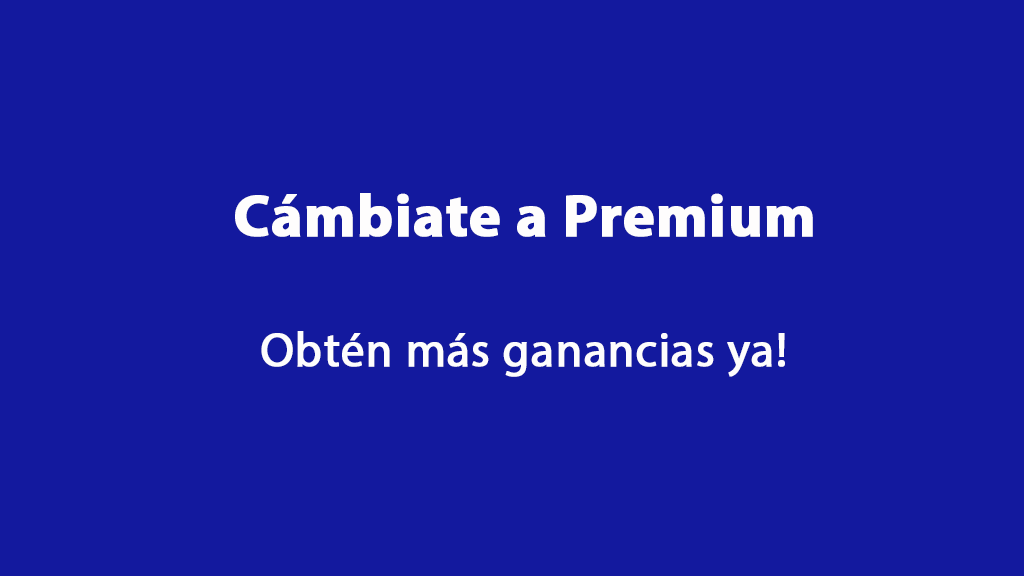
<style>
.page{position:relative;width:1024px;height:576px;background:#13199e}
.page>*{position:absolute;margin:0}
.t1{font:60px "MyriadPro-Bold";color:#fefdfd;font-weight:bold}
.t2{font:48px "MyriadPro-Regular";color:#fefdfd;font-weight:bold}
</style>
<div class="page">
<p class="t1" style="left:235px;top:193px;width:578px;height:44px">Cámbiate a Premium</p>
<p class="t2" style="left:261px;top:331px;width:524px;height:46px">Obtén más ganancias ya!</p>
</div>
